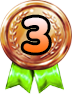
<style>
.page{position:relative;width:72px;height:94px;background:#ffffff}
.page>*{position:absolute;margin:0}
.t1{font:48px "Nunito-Black";letter-spacing:-0.04em}
</style>
<div class="page">
<p class="t1" style="left:23px;top:17px;width:26px;height:36px">3</p>
</div>
